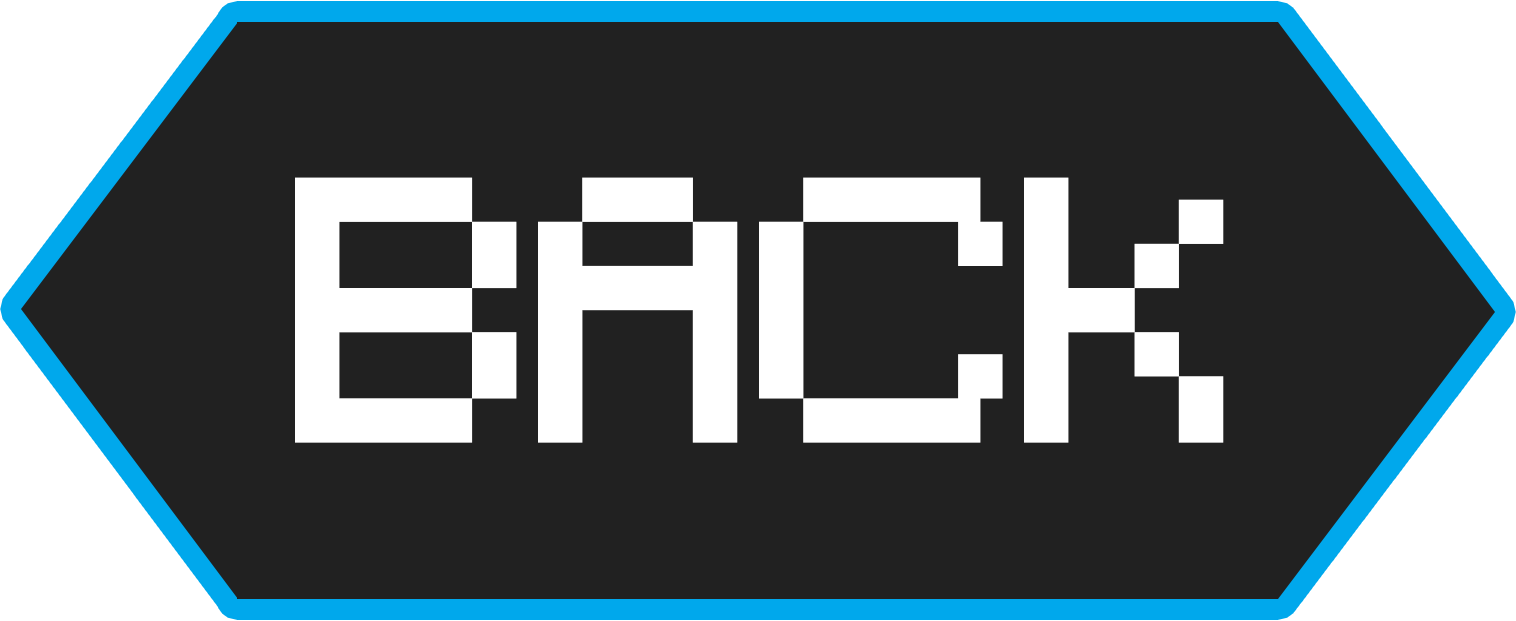
<style>
.page{position:relative;width:1516px;height:621px;background:#212121}
.page>*{position:absolute;margin:0}
.t1{font:353.3px "Minecraft";color:#ffffff}
</style>
<div class="page">
<p class="t1" style="left:295px;top:177px;width:929px;height:266px">BACK</p>
</div>
